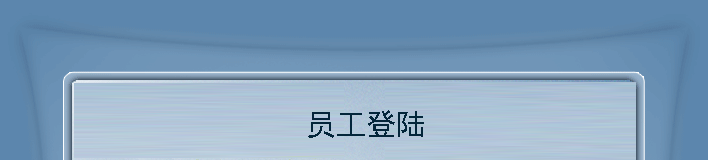
<style>
.page{position:relative;width:708px;height:160px;background:#5c86ad}
.page>*{position:absolute;margin:0}
.t1{font:30px "SimHei";color:#03253a}
</style>
<div class="page">
<p class="t1" style="left:308px;top:110px;width:116px;height:28px">员工登陆</p>
</div>
